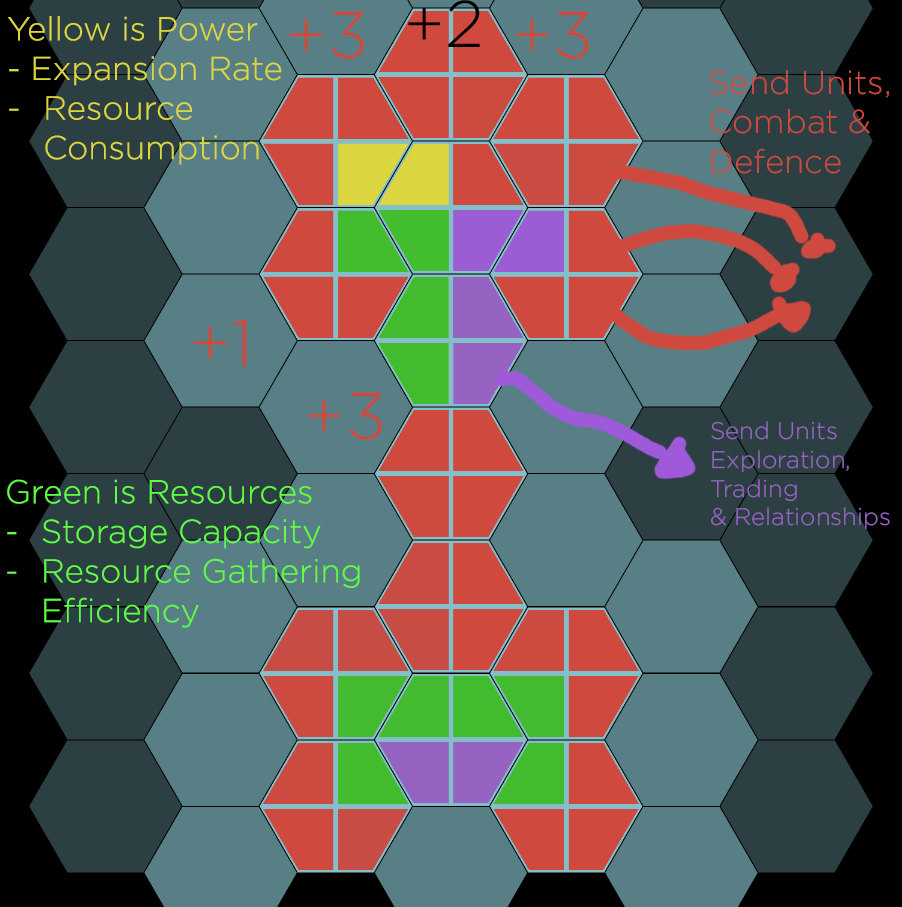
<style>
.page{position:relative;width:902px;height:907px;background:#587f85}
.page>*{position:absolute;margin:0}
.t1{font:66px "Gotham-Light";color:#000000}
.t2{font:33px "Gotham-Light";color:#dbd640}
.t3{font:66px "Gotham-Light";color:#cf493f}
.t4{font:33px "Gotham-Light";color:#cf493f}
.t5{font:24px "Gotham-Light";color:#9663c2}
.t6{font:33px "Gotham-Light";color:#5ffd44}
</style>
<div class="page">
<p class="t1" style="left:408px;top:0px;width:72px;height:47px">+2</p>
<p class="t2" style="left:8px;top:16px;width:274px;height:149px">Yellow is Power<br>- Expansion Rate<br>-  Resource <br> Consumption</p>
<p class="t3" style="left:290px;top:11px;width:74px;height:48px">+3</p>
<p class="t3" style="left:516px;top:11px;width:73px;height:48px">+3</p>
<p class="t4" style="left:710px;top:70px;width:179px;height:104px">Send Units,<br>Combat &amp;<br>Defence</p>
<p class="t3" style="left:194px;top:319px;width:53px;height:47px">+1</p>
<p class="t3" style="left:308px;top:392px;width:74px;height:48px">+3</p>
<p class="t5" style="left:711px;top:421px;width:179px;height:108px">Send Units<br>Exploration,<br>Trading<br>&amp; Relationships</p>
<p class="t6" style="left:7px;top:479px;width:353px;height:149px">Green is Resources<br>-  Storage Capacity<br>-  Resource Gathering <br> Efficiency</p>
</div>
